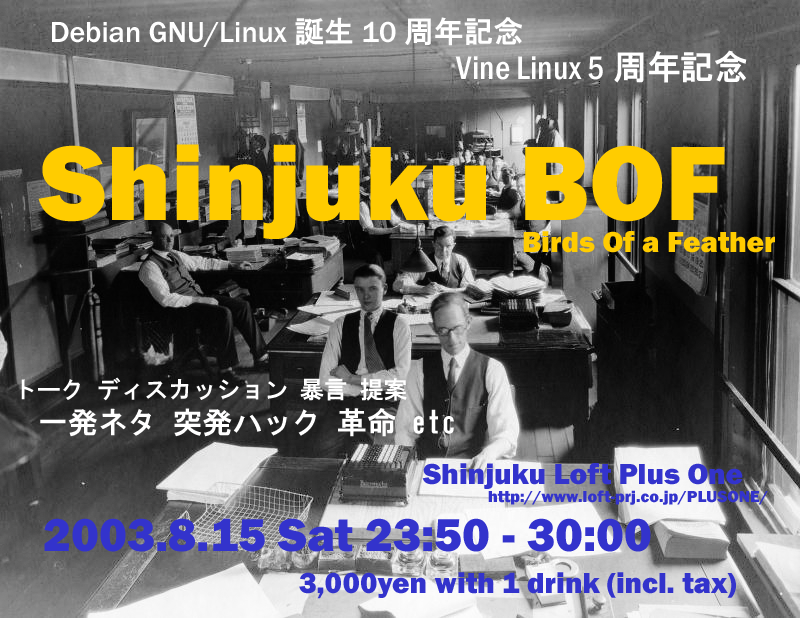
<style>
.page{position:relative;width:800px;height:618px}
.page>*{position:absolute;margin:0}
.t1{font:29.9px "FranklinGothic-Medium";color:#ffffff}
.t2{font:29.9px "HGGothicE";color:#ffffff}
.t3{font:33.9px "FranklinGothic-MediumCond";color:#ffffff}
.t4{font:33.9px "HGGothicE";color:#ffffff}
.t5{font:109.6px "FranklinGothic-Heavy";color:#ffcc00}
.t6{font:29.9px "FranklinGothic-Heavy";color:#ffcc00}
.t7{font:23.9px "HGGothicE";color:#ffffff}
.t8{font:29.9px "FranklinGothic-Heavy";color:#3333cc}
.t9{font:16.6px "FranklinGothic-Heavy";color:#3333cc}
.t10{font:47.8px "FranklinGothic-Heavy";color:#3333cc}
</style>
<div class="page">
<p class="t1" style="left:52px;top:17px;width:470px;height:30px">Debian GNU/Linux<span class="t2">誕生</span>10<span class="t2">周年記念</span></p>
<p class="t3" style="left:455px;top:50px;width:292px;height:33px">Vine Linux 5<span class="t4">周年記念</span></p>
<p class="t5" style="left:38px;top:144px;width:687px;height:95px">Shinjuku BOF</p>
<p class="t6" style="left:523px;top:231px;width:252px;height:22px">Birds Of a Feather</p>
<p class="t7" style="left:21px;top:377px;width:386px;height:24px">トーク ディスカッション 暴言 提案</p>
<p class="t2" style="left:40px;top:408px;width:414px;height:29px">一発ネタ 突発ハック 革命 etc</p>
<p class="t8" style="left:422px;top:463px;width:321px;height:26px">Shinjuku Loft Plus One</p>
<p class="t9" style="left:488px;top:490px;width:280px;height:15px">http://www.loft-prj.co.jp/PLUSONE/</p>
<p class="t10" style="left:44px;top:518px;width:607px;height:34px">2003.8.15 Sat 23:50 - 30:00</p>
<p class="t8" style="left:299px;top:572px;width:437px;height:27px">3,000yen with 1 drink (incl. tax)</p>
</div>
